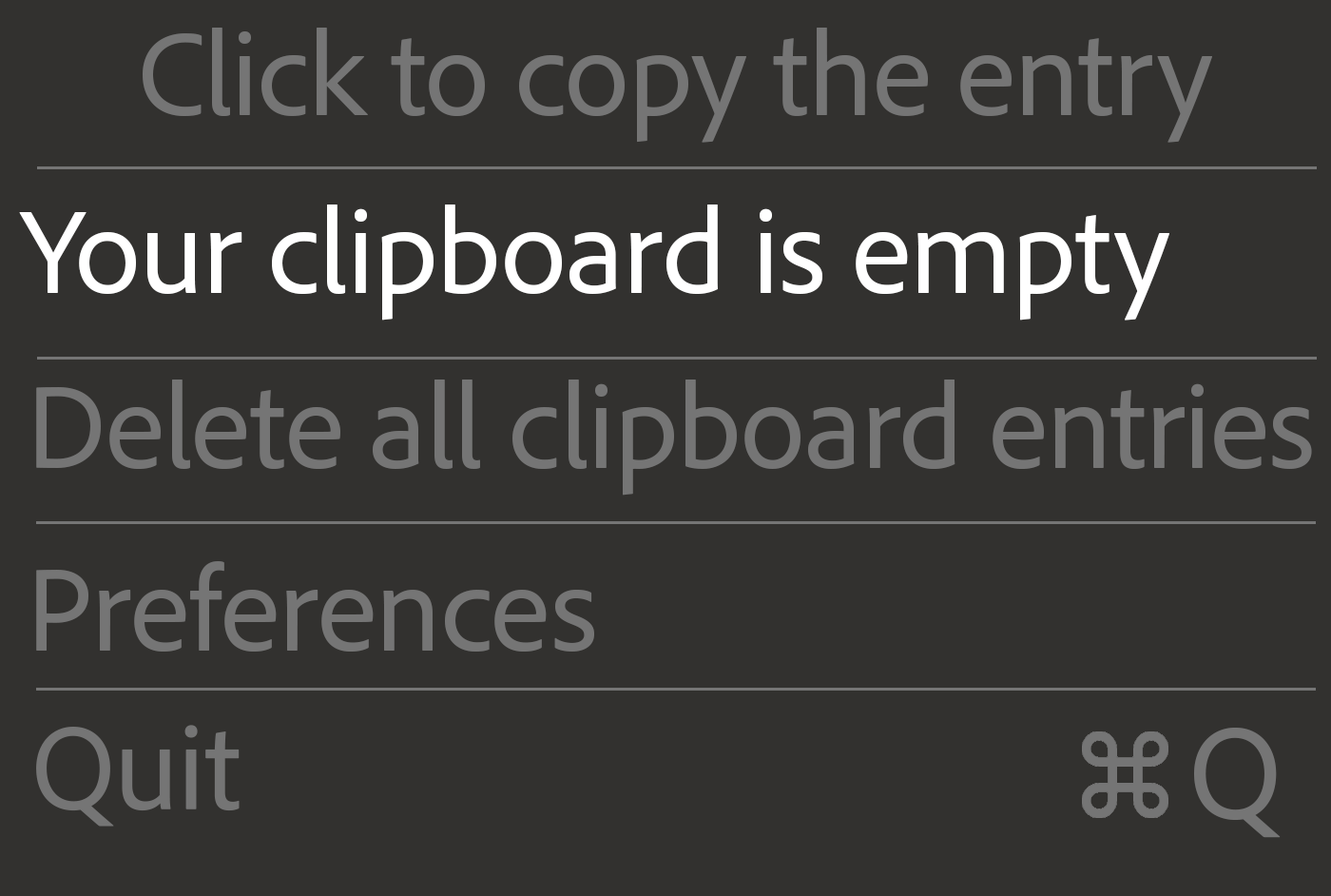
<style>
.page{position:relative;width:1331px;height:896px;background:#32312f}
.page>*{position:absolute;margin:0}
.t1{font:121.8px "AdobeClean-Regular";letter-spacing:-0.01em;color:#757575}
.t2{font:123px "AdobeClean-Regular";letter-spacing:-0.01em;color:#ffffff}
.t3{font:123px "AdobeClean-Regular";letter-spacing:-0.01em;color:#757575}
.t4{font:136.1px "AdobeClean-Regular";letter-spacing:-0.01em;color:#757575}
</style>
<div class="page">
<p class="t1" style="left:143px;top:28px;width:1069px;height:115px">Click to copy the entry</p>
<p class="t2" style="left:19px;top:204px;width:1151px;height:116px">Your clipboard is empty</p>
<p class="t3" style="left:36px;top:379px;width:1276px;height:116px">Delete all clipboard entries</p>
<p class="t3" style="left:36px;top:561px;width:558px;height:91px">Preferences</p>
<p class="t4" style="left:1194px;top:727px;width:87px;height:111px">Q</p>
</div>
